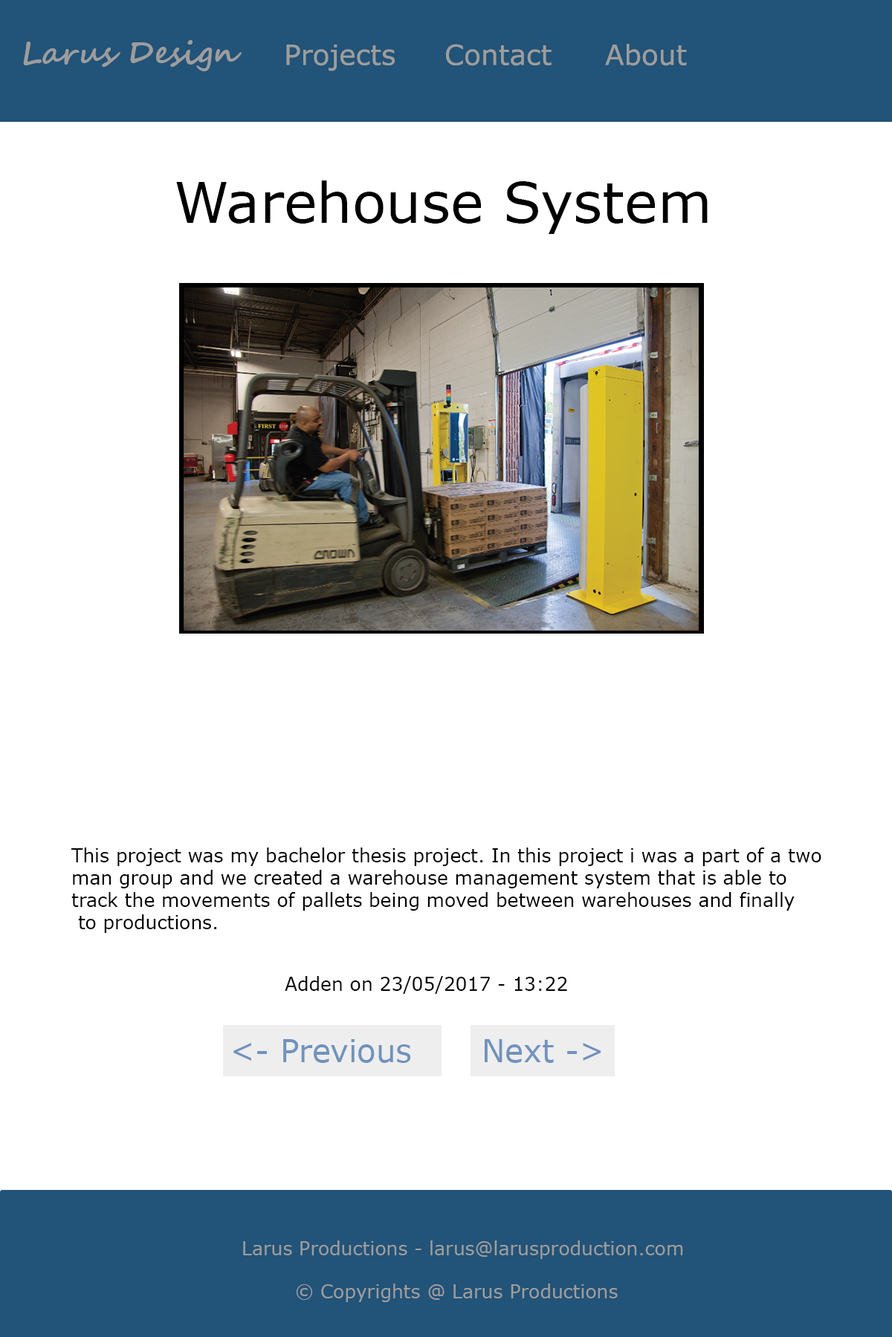
<style>
.page{position:relative;width:892px;height:1337px;background:#ffffff}
.page>*{position:absolute;margin:0}
.t1{font:31px "SegoeScript-Bold";color:#9d9d9d}
.t2{font:27.9px "MSReferenceSansSerif";color:#9d9d9d}
.t3{font:55.7px "MSReferenceSansSerif";color:#010000}
.t4{font:18.6px "MSReferenceSansSerif";color:#000000}
.t5{font:18.6px "MSReferenceSansSerif";color:#000205}
.t6{font:31px "MSReferenceSansSerif";color:#7192bd}
.t7{font:18.6px "MSReferenceSansSerif";color:#9d9d9d}
</style>
<div class="page">
<p class="t1" style="left:23px;top:40px;width:218px;height:31px">Larus Design</p>
<p class="t2" style="left:286px;top:44px;width:401px;height:27px">Projects  Contact    About</p>
<p class="t3" style="left:176px;top:181px;width:531px;height:53px">Warehouse System</p>
<p class="t4" style="left:71px;top:848px;width:750px;height:85px">This project was my bachelor thesis project. In this project i was a part of a two <br>man group and we created a warehouse management system that is able to <br>track the movements of pallets being moved between warehouses and finally<br> to productions.</p>
<p class="t5" style="left:285px;top:976px;width:282px;height:18px">Adden on 23/05/2017 - 13:22</p>
<p class="t6" style="left:233px;top:1039px;width:178px;height:24px">&lt;- Previous</p>
<p class="t6" style="left:484px;top:1039px;width:117px;height:24px">Next -&gt;</p>
<p class="t7" style="left:243px;top:1241px;width:440px;height:18px">Larus Productions - larus@larusproduction.com</p>
<p class="t7" style="left:296px;top:1284px;width:321px;height:18px">© Copyrights @ Larus Productions</p>
</div>
